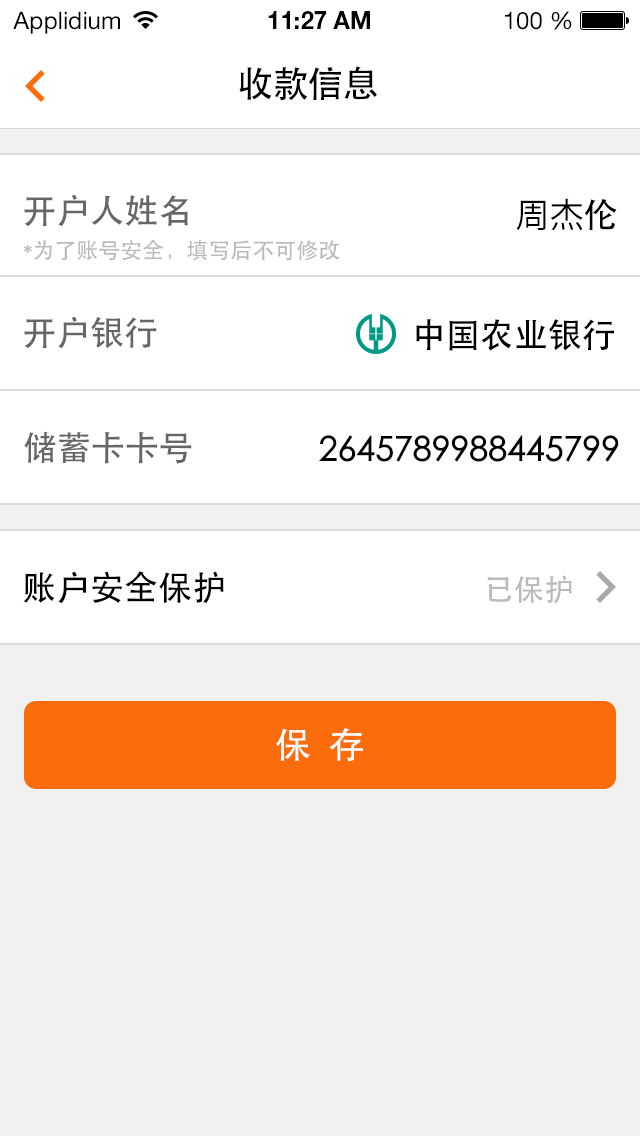
<style>
.page{position:relative;width:640px;height:1136px;background:#ffffff}
.page>*{position:absolute;margin:0}
.t1{font:24px "HelveticaNeueLTStd-Roman";color:#000000}
.t2{font:24px "HelveticaNeueLTStd-Bd";color:#000000}
.t3{font:36px "STHeiti";letter-spacing:-0.025em;color:#000000}
.t4{font:34px "STHeiti";color:#666666}
.t5{font:34px "KozGoPr6N-Regular";color:#000000}
.t6{font:34px "AdobeHeitiStd-Regular";color:#000000}
.t7{font:22px "STHeiti";color:#bbbbbb}
.t8{font:34px "STHeiti";color:#000000}
.t9{font:30px "STHeiti";color:#bbbbbb}
.t10{font:36px "STHeiti";color:#ffffff}
</style>
<div class="page">
<p class="t1" style="left:13px;top:11px;width:107px;height:23px">Applidium</p>
<p class="t2" style="left:268px;top:11px;width:102px;height:18px">11:27 AM</p>
<p class="t1" style="left:505px;top:11px;width:67px;height:19px">100 %</p>
<p class="t3" style="left:239px;top:66px;width:138px;height:35px">收款信息</p>
<p class="t4" style="left:24px;top:194px;width:164px;height:33px">开户人姓名</p>
<p class="t5" style="left:516px;top:198px;width:101px;height:33px">周杰<span class="t6">伦</span></p>
<p class="t7" style="left:23px;top:239px;width:317px;height:22px">*为了账号安全，填写后不可修改</p>
<p class="t4" style="left:24px;top:316px;width:133px;height:33px">开户银行</p>
<p class="t8" style="left:416px;top:319px;width:198px;height:32px">中国农业银行</p>
<p class="t4" style="left:24px;top:431px;width:168px;height:33px">储蓄卡卡号</p>
<p class="t8" style="left:319px;top:435px;width:300px;height:27px">2645789988445799</p>
<p class="t8" style="left:23px;top:571px;width:201px;height:33px">账户安全保护</p>
<p class="t9" style="left:487px;top:575px;width:85px;height:29px">已保护</p>
<p class="t10" style="left:276px;top:728px;width:87px;height:34px">保  存</p>
</div>
